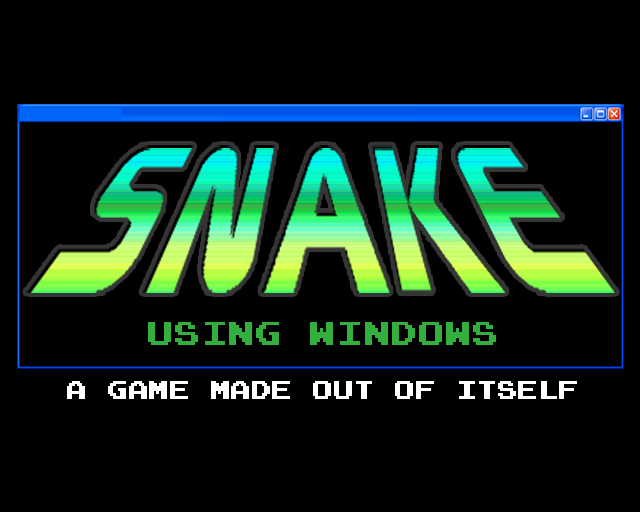
<style>
.page{position:relative;width:640px;height:512px;background:#000000}
.page>*{position:absolute;margin:0}
.t1{font:26.4px "PressStart2P";letter-spacing:0.025em;color:#32af3c}
.t2{font:20px "PressStart2P";letter-spacing:0.025em;color:#ffffff}
</style>
<div class="page">
<p class="t1" style="left:148px;top:322px;width:348px;height:23px">USING WINDOWS</p>
<p class="t2" style="left:67px;top:381px;width:510px;height:18px">A GAME MADE OUT OF ITSELF</p>
</div>
